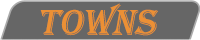
<style>
.page{position:relative;width:200px;height:40px;background:#666666}
.page>*{position:absolute;margin:0}
.t1{font:36.9px "Algerian";color:#ec9035;font-style:italic}
</style>
<div class="page">
<p class="t1" style="left:40px;top:3px;width:118px;height:33px">Towns</p>
</div>
